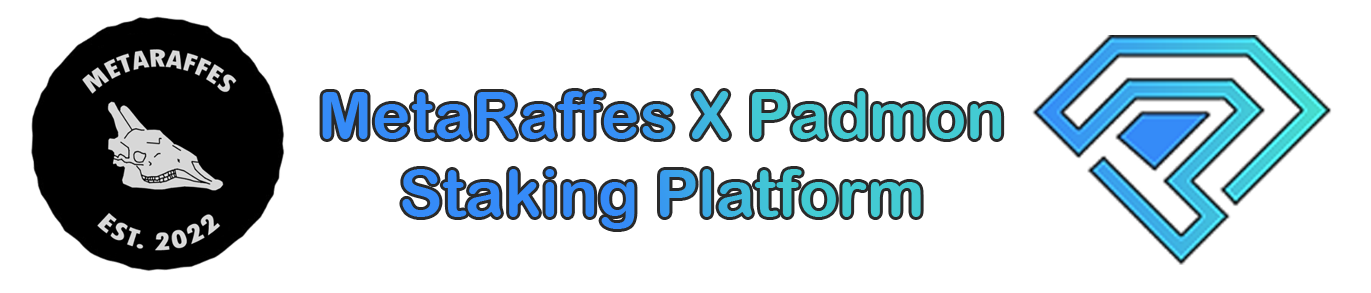
<style>
.page{position:relative;width:1371px;height:293px;background:#ffffff}
.page>*{position:absolute;margin:0}
.t1{font:65px "ArialRoundedMTBold"}
</style>
<div class="page">
<p class="t1" style="left:322px;top:91px;width:680px;height:138px;text-align:center">MetaRaffes X Padmon<br>Staking Platform</p>
</div>
